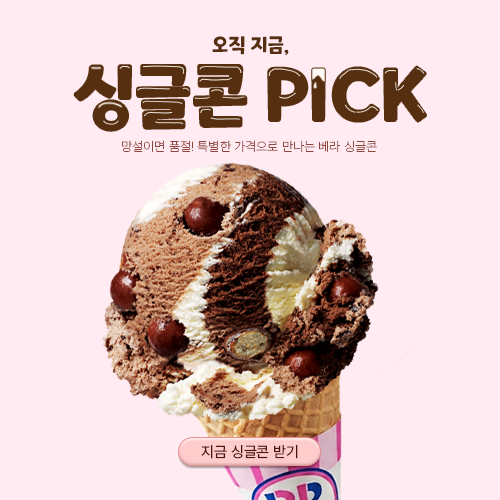
<style>
.page{position:relative;width:500px;height:500px;background:#ffebf1}
.page>*{position:absolute;margin:0}
.t1{font:20px "ONEMobilePOPRegular";color:#562f10;text-transform:uppercase}
.t2{font:70px "ONEMobilePOPRegular";color:#562f10;text-transform:uppercase}
.t3{font:13px "Pretendard-Thin";color:#8e453d;text-transform:uppercase}
.t4{font:15px "Pretendard-Regular";color:#4d130d;text-transform:uppercase}
</style>
<div class="page">
<p class="t1" style="left:212px;top:36px;width:77px;height:19px">오직 지금,</p>
<p class="t2" style="left:74px;top:65px;width:352px;height:66px">싱글콘 pick</p>
<p class="t3" style="left:122px;top:140px;width:255px;height:12px">망설이면 품절! 특별한 가격으로 만나는 베라 싱글콘</p>
<p class="t4" style="left:201px;top:445px;width:97px;height:14px">지금 싱글콘 받기</p>
</div>
